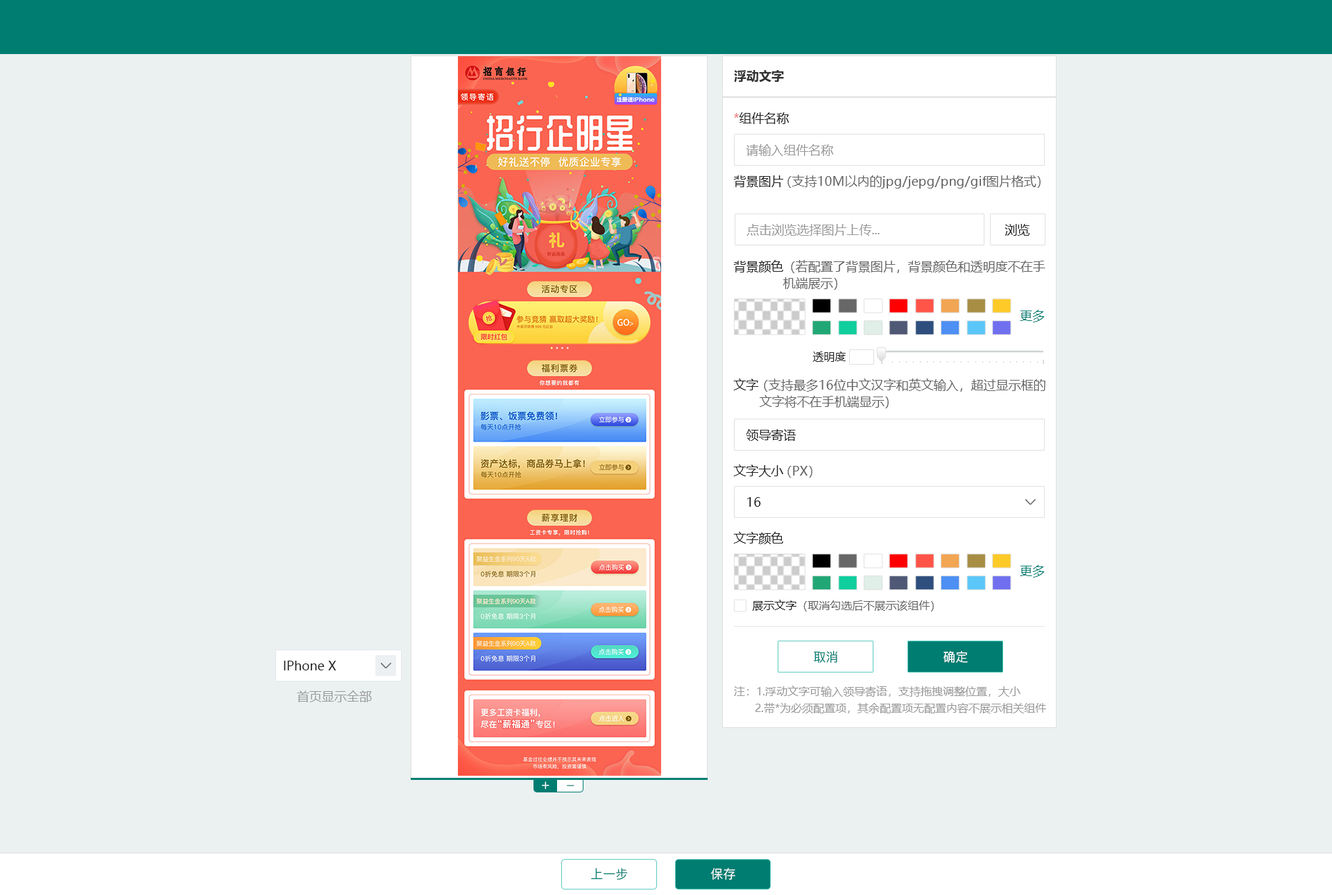
<style>
.page{position:relative;width:1332px;height:895px;background:#ebf1f1}
.page>*{position:absolute;margin:0}
.t1{font:12.5px "MicrosoftYaHei-Bold";color:#333333}
.t2{font:12.5px "MicrosoftYaHei";color:#222222}
.t3{font:12.5px "MicrosoftYaHei";color:#ee7575}
.t4{font:12.5px "MicrosoftYaHei";color:#999999}
.t5{font:12.5px "MicrosoftYaHei";color:#666666}
.t6{font:12.5px/16.6px "MicrosoftYaHei";color:#666666}
.t7{font:12.5px "MicrosoftYaHei";color:#007d71}
.t8{font:11.1px "MicrosoftYaHei";color:#222222}
.t9{font:11.1px "MicrosoftYaHei";color:#666666}
.t10{font:12.5px "PingFang-SC-Medium";color:#007d71}
.t11{font:12.5px "PingFang-SC-Medium";color:#ffffff}
.t12{font:11.1px/16.6px "MicrosoftYaHei";color:#999999}
.t13{font:13.9px "PingFang-SC-Medium";color:#ffffff}
.t14{font:13.9px "PingFang-SC-Medium"}
</style>
<div class="page">
<p class="t1" style="left:734px;top:70px;width:50px;height:13px">浮动文字</p>
<p class="t2" style="left:734px;top:112px;width:55px;height:12px"><span class="t3">*</span>组件名称</p>
<p class="t4" style="left:746px;top:144px;width:87px;height:12px">请输入组件名称</p>
<p class="t2" style="left:733px;top:175px;width:50px;height:12px">背景图片</p>
<p class="t5" style="left:787px;top:175px;width:253px;height:14px">（支持10M以内的jpg/jepg/png/gif图片格式）</p>
<p class="t4" style="left:746px;top:224px;width:133px;height:12px">点击浏览选择图片上传...</p>
<p class="t2" style="left:1004px;top:224px;width:25px;height:12px">浏览</p>
<p class="t2" style="left:733px;top:260px;width:50px;height:13px">背景颜色</p>
<p class="t6" style="left:783px;top:260px;width:262px;height:30px">（若配置了背景图片，背景颜色和透明度不在手<br>机端展示）</p>
<p class="t7" style="left:1020px;top:310px;width:24px;height:13px">更多</p>
<p class="t8" style="left:812px;top:352px;width:33px;height:10px">透明度</p>
<p class="t2" style="left:733px;top:379px;width:25px;height:11px">文字</p>
<p class="t6" style="left:759px;top:379px;width:286px;height:30px">（支持最多16位中文汉字和英文输入，超过显示框的<br> 文字将不在手机端显示）</p>
<p class="t2" style="left:746px;top:429px;width:50px;height:12px">领导寄语</p>
<p class="t2" style="left:733px;top:465px;width:50px;height:12px">文字大小</p>
<p class="t5" style="left:787px;top:466px;width:25px;height:12px">（PX）</p>
<p class="t2" style="left:747px;top:497px;width:14px;height:10px">16</p>
<p class="t2" style="left:733px;top:532px;width:50px;height:12px">文字颜色</p>
<p class="t7" style="left:1020px;top:565px;width:24px;height:13px">更多</p>
<p class="t9" style="left:752px;top:600px;width:182px;height:12px"><span class="t8">展示文字</span>（取消勾选后不展示该组件）</p>
<p class="t10" style="left:814px;top:651px;width:23px;height:12px">取消</p>
<p class="t11" style="left:943px;top:651px;width:25px;height:12px">确定</p>
<p class="t2" style="left:284px;top:661px;width:52px;height:10px">IPhone X</p>
<p class="t12" style="left:734px;top:686px;width:312px;height:28px">注：1.浮动文字可输入领导寄语，支持拖拽调整位置，大小<br>      2.带*为必须配置项，其余配置项无配置内容不展示相关组件</p>
<p class="t4" style="left:297px;top:691px;width:75px;height:12px">首页显示全部</p>
<p class="t13" style="left:542px;top:782px;width:7px;height:8px">+</p>
<p class="t14" style="left:567px;top:785px;width:7px;height:2px">_</p>
<p class="t10" style="left:591px;top:868px;width:37px;height:12px">上一步</p>
<p class="t11" style="left:710px;top:868px;width:25px;height:12px">保存</p>
</div>
